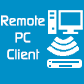
<style>
.page{position:relative;width:84px;height:84px;background:#0090c8}
.page>*{position:absolute;margin:0}
.t1{font:14px "ContinuumMedium";color:#ffffff}
</style>
<div class="page">
<p class="t1" style="left:1px;top:15px;width:44px;height:45px;text-align:center">Remote<br>PC<br>Client</p>
</div>
